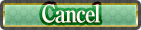
<style>
.page{position:relative;width:141px;height:30px}
.page>*{position:absolute;margin:0}
.t1{font:24px "RyuminPro-ExBold";letter-spacing:-0.08em;color:#fff6f2;scale:0.9 1}
</style>
<div class="page">
<p class="t1" style="left:42px;top:4px;width:58px;height:19px">Cancel</p>
</div>
